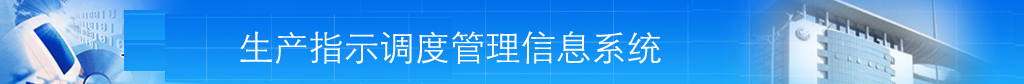
<style>
.page{position:relative;width:1024px;height:84px}
.page>*{position:absolute;margin:0}
.t1{font:35.3px "STXihei";color:#ffffff}
</style>
<div class="page">
<p class="t1" style="left:240px;top:31px;width:421px;height:33px">生产指示调度管理信息系统</p>
</div>
